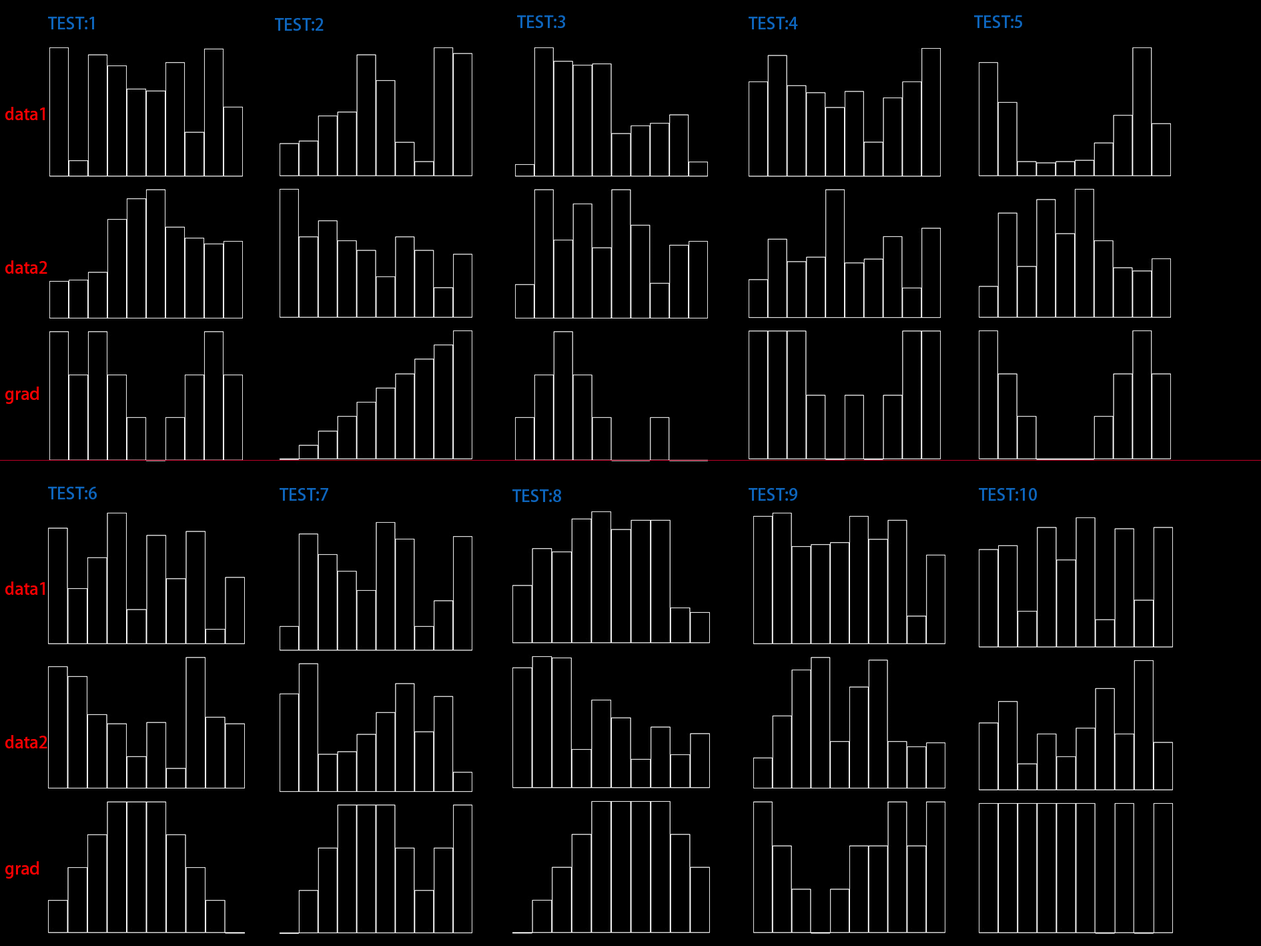
<style>
.page{position:relative;width:1261px;height:946px;background:#000000}
.page>*{position:absolute;margin:0}
.t1{font:16.7px "AdobeHeitiStd-Regular";color:#0e65bb}
.t2{font:16.7px "AdobeHeitiStd-Regular";color:#fa0002}
</style>
<div class="page">
<p class="t1" style="left:48px;top:17px;width:46px;height:12px">TEST:1</p>
<p class="t1" style="left:517px;top:15px;width:48px;height:13px">TEST:3</p>
<p class="t1" style="left:749px;top:17px;width:49px;height:12px">TEST:4</p>
<p class="t1" style="left:974px;top:15px;width:48px;height:13px">TEST:5</p>
<p class="t1" style="left:275px;top:18px;width:49px;height:13px">TEST:2</p>
<p class="t2" style="left:5px;top:107px;width:40px;height:13px">data1</p>
<p class="t2" style="left:5px;top:260px;width:42px;height:14px">data2</p>
<p class="t2" style="left:5px;top:386px;width:34px;height:18px">grad</p>
<p class="t1" style="left:48px;top:486px;width:49px;height:13px">TEST:6</p>
<p class="t1" style="left:280px;top:488px;width:48px;height:12px">TEST:7</p>
<p class="t1" style="left:512px;top:489px;width:49px;height:13px">TEST:8</p>
<p class="t1" style="left:749px;top:488px;width:48px;height:12px">TEST:9</p>
<p class="t1" style="left:979px;top:488px;width:58px;height:12px">TEST:10</p>
<p class="t2" style="left:5px;top:581px;width:40px;height:14px">data1</p>
<p class="t2" style="left:5px;top:735px;width:42px;height:13px">data2</p>
<p class="t2" style="left:5px;top:861px;width:34px;height:17px">grad</p>
</div>
